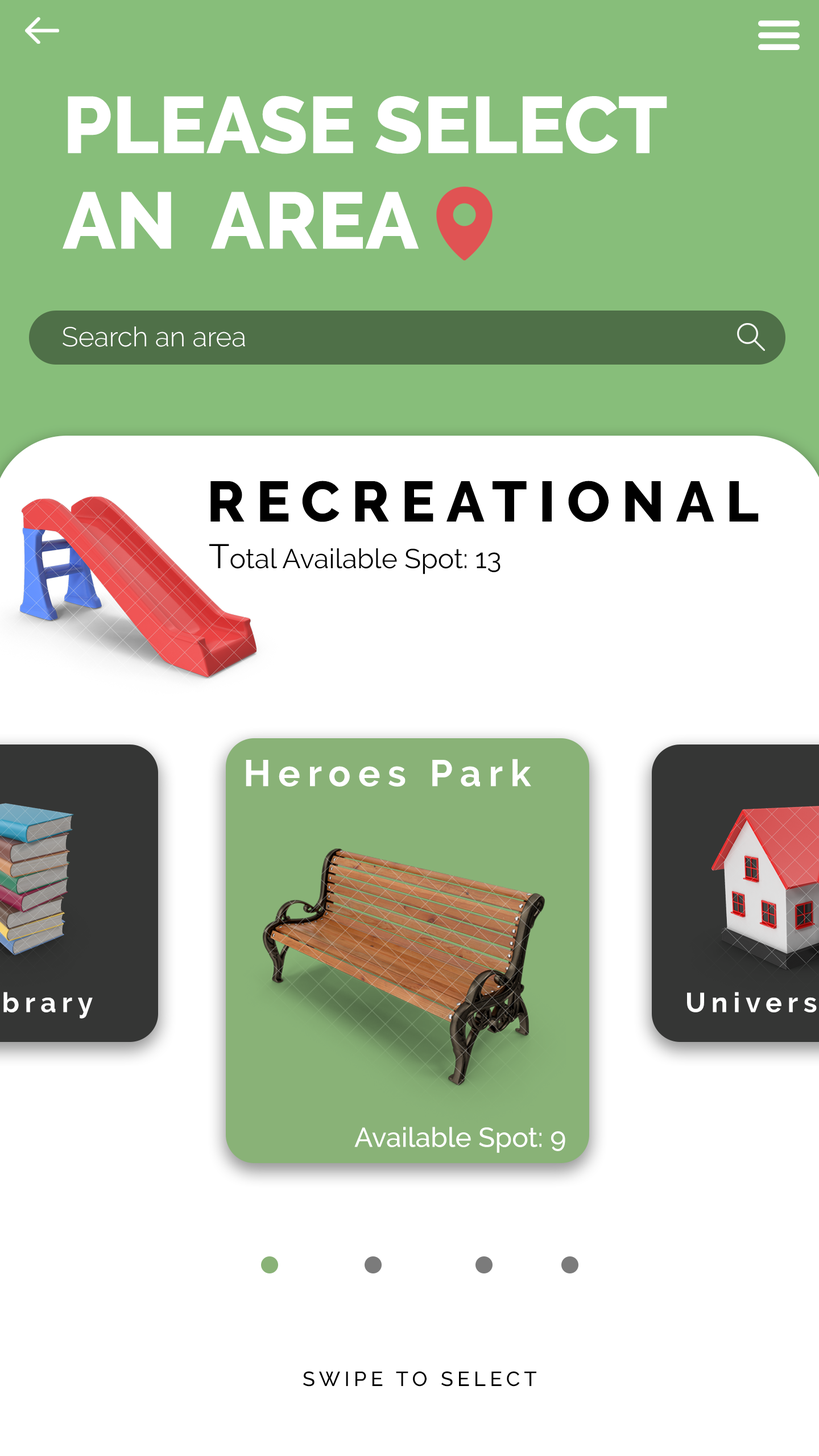
<style>
.page{position:relative;width:819px;height:1456px;background:#ffffff}
.page>*{position:absolute;margin:0}
.t1{font:79.6px "Raleway-ExtraBold";color:#ffffff}
.t2{font:27.3px "Raleway-Light";color:#ffffff}
.t3{font:56.9px "Raleway-ExtraBold";letter-spacing:0.2em;color:#000000}
.t4{font:27.3px "Raleway-Regular";color:#000000}
.t5{font:34.1px "Raleway-Regular";color:#000000}
.t6{font:37px "Raleway-Bold";letter-spacing:0.2em;color:#ffffff}
.t7{font:27.3px "Raleway-Medium";color:#ffffff}
.t8{font:20.5px "Raleway-Medium";letter-spacing:0.2em;color:#000000}
</style>
<div class="page">
<p class="t1" style="left:63px;top:96px;width:604px;height:153px">PLEASE SELECT <br>AN  AREA</p>
<p class="t2" style="left:63px;top:326px;width:182px;height:21px">Search an area</p>
<p class="t3" style="left:210px;top:481px;width:549px;height:41px">RECREATIONAL</p>
<p class="t4" style="left:209px;top:544px;width:291px;height:30px"><span class="t5">T</span>otal Available Spot: 13</p>
<p class="t6" style="left:246px;top:759px;width:285px;height:28px">Heroes Park</p>
<p class="t7" style="left:354px;top:1127px;width:211px;height:26px">Available Spot: 9</p>
<p class="t8" style="left:303px;top:1371px;width:233px;height:16px">SWIPE TO SELECT</p>
</div>
